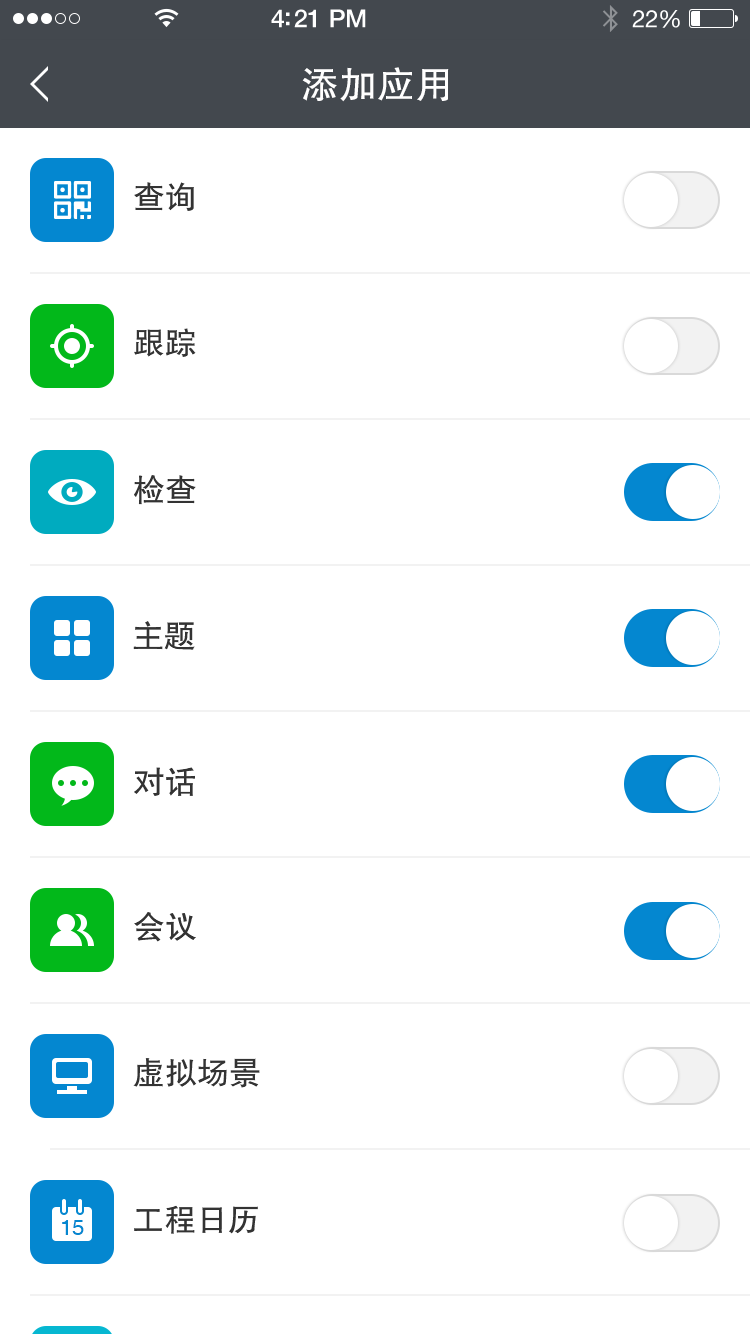
<style>
.page{position:relative;width:750px;height:1334px;background:#ffffff}
.page>*{position:absolute;margin:0}
.t1{font:38px "FZHTJW--GB1-0";color:#ffffff}
.t2{font:32px "FZHTJW--GB1-0";color:#333333}
.t3{font:22px "Helvetica";color:#0487d0}
</style>
<div class="page">
<p class="t1" style="left:302px;top:67px;width:147px;height:35px">添加应用</p>
<p class="t2" style="left:134px;top:182px;width:60px;height:29px">查询</p>
<p class="t2" style="left:134px;top:328px;width:62px;height:29px">跟踪</p>
<p class="t2" style="left:134px;top:475px;width:62px;height:30px">检查</p>
<p class="t2" style="left:133px;top:621px;width:62px;height:29px">主题</p>
<p class="t2" style="left:134px;top:767px;width:61px;height:29px">对话</p>
<p class="t2" style="left:134px;top:912px;width:62px;height:30px">会议</p>
<p class="t2" style="left:133px;top:1058px;width:127px;height:30px">虚拟场景</p>
<p class="t2" style="left:134px;top:1205px;width:124px;height:29px">工程日历</p>
<p class="t3" style="left:62px;top:1220px;width:22px;height:15px">15</p>
</div>
